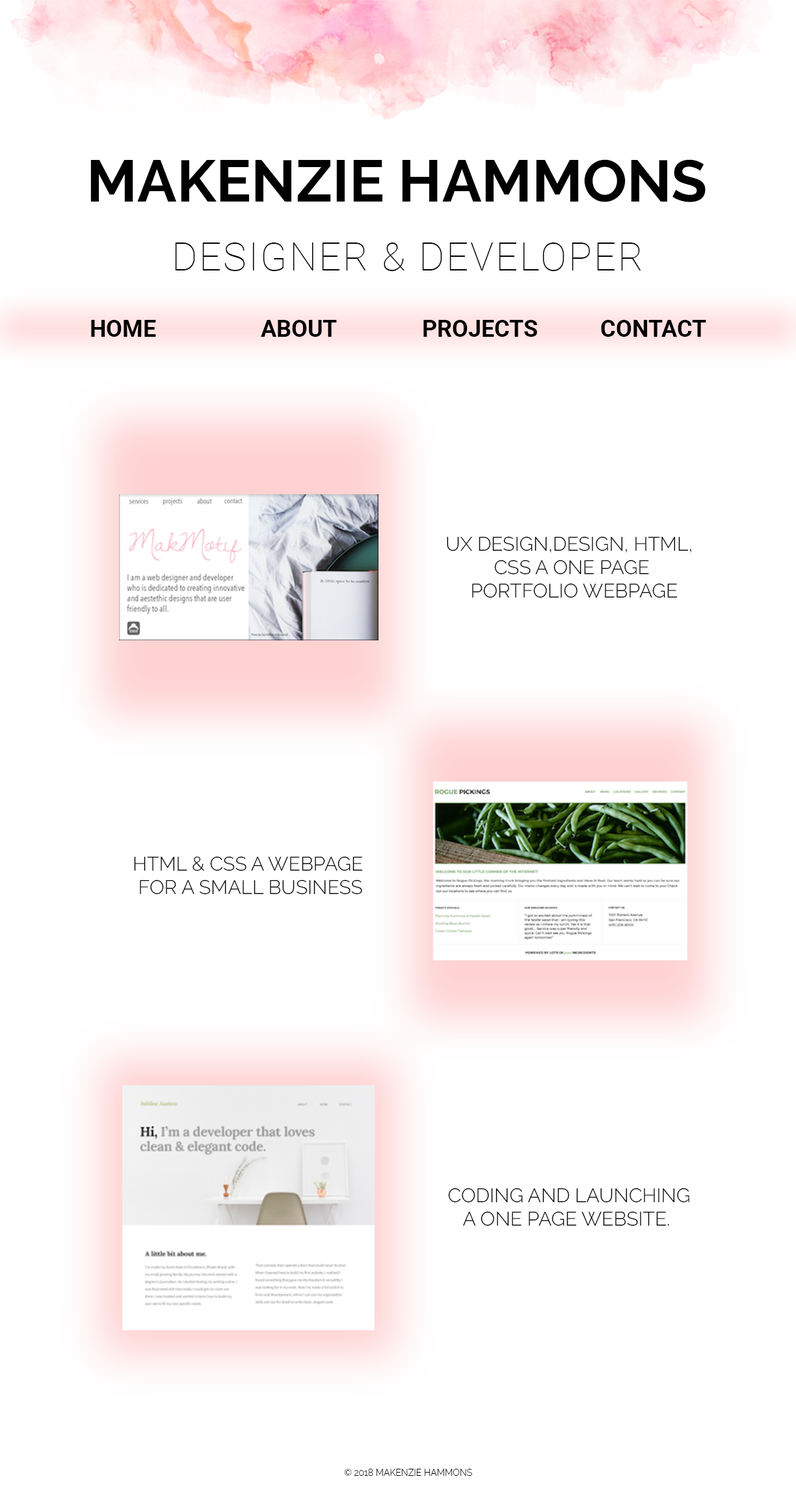
<style>
.page{position:relative;width:796px;height:1498px;background:#ffffff}
.page>*{position:absolute;margin:0}
.t1{font:58.5px "Raleway-Bold";color:#000000}
.t2{font:39px "Roboto-Thin";letter-spacing:0.05em;color:#000000}
.t3{font:23.4px "Roboto-Bold";color:#000000}
.t4{font:19.5px "Raleway-Light";color:#000000}
.t5{font:9.1px "Raleway-Light";color:#000000}
</style>
<div class="page">
<p class="t1" style="left:90px;top:159px;width:616px;height:43px">MAKENZIE HAMMONS</p>
<p class="t2" style="left:175px;top:243px;width:466px;height:28px">DESIGNER &amp; DEVELOPER</p>
<p class="t3" style="left:91px;top:320px;width:65px;height:17px">HOME</p>
<p class="t3" style="left:261px;top:320px;width:76px;height:17px">ABOUT</p>
<p class="t3" style="left:423px;top:320px;width:114px;height:17px">PROJECTS</p>
<p class="t3" style="left:601px;top:320px;width:105px;height:17px">CONTACT</p>
<p class="t4" style="left:447px;top:536px;width:244px;height:62px;text-align:center">UX DESIGN,DESIGN, HTML, <br>CSS A ONE PAGE<br> PORTFOLIO WEBPAGE</p>
<p class="t4" style="left:134px;top:856px;width:229px;height:39px;text-align:center">HTML &amp; CSS A WEBPAGE <br>FOR A SMALL BUSINESS</p>
<p class="t4" style="left:448px;top:1188px;width:241px;height:38px;text-align:center">CODING AND LAUNCHING<br>A ONE PAGE WEBSITE.</p>
<p class="t5" style="left:344px;top:1469px;width:128px;height:7px">© 2018 MAKENZIE HAMMONS</p>
</div>
